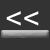
<style>
.page{position:relative;width:50px;height:50px;background:#333333}
.page>*{position:absolute;margin:0}
.t1{font:30px "ArialMT";color:#ffffff}
</style>
<div class="page">
<p class="t1" style="left:6px;top:11px;width:33px;height:15px">&lt;&lt;</p>
</div>
